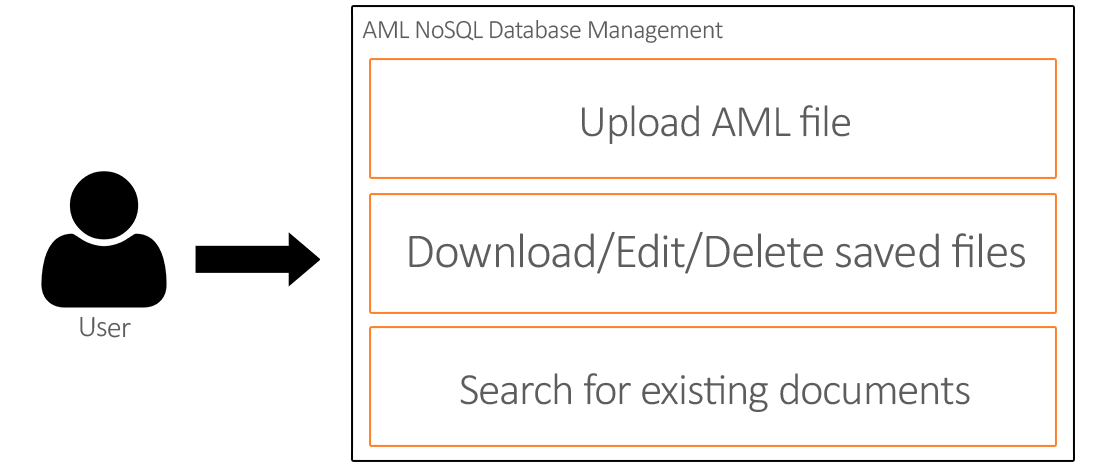
<style>
.page{position:relative;width:1116px;height:468px;background:#ffffff}
.page>*{position:absolute;margin:0}
.t1{font:26.4px "Calibri-Light";letter-spacing:-0.025em;color:#5c5d5f}
.t2{font:45px "Calibri-Light";letter-spacing:-0.025em;color:#5c5d5f}
.t3{font:49.4px "Calibri-Light";letter-spacing:-0.025em;color:#5c5d5f}
.t4{font:30.1px "Calibri-Light";letter-spacing:-0.025em;color:#5c5d5f}
</style>
<div class="page">
<p class="t1" style="left:362px;top:19px;width:361px;height:24px">AML NoSQL Database Management</p>
<p class="t2" style="left:582px;top:105px;width:268px;height:39px">Upload AML file</p>
<p class="t3" style="left:409px;top:231px;width:616px;height:43px">Download/Edit/Delete saved files</p>
<p class="t4" style="left:80px;top:316px;width:51px;height:22px">User</p>
<p class="t2" style="left:460px;top:373px;width:510px;height:39px">Search for existing documents</p>
</div>
